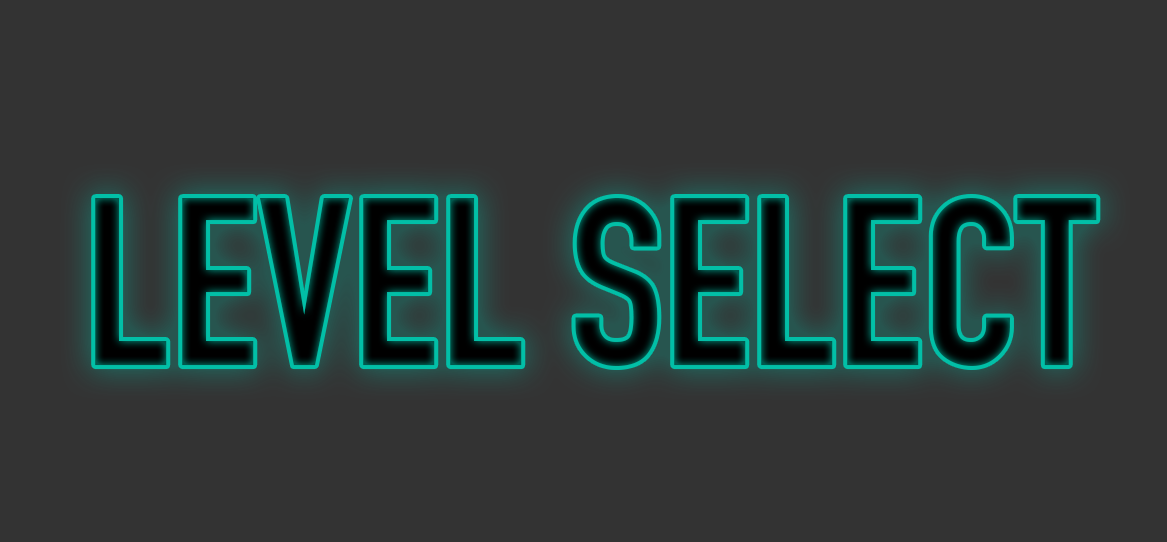
<style>
.page{position:relative;width:1167px;height:542px;background:#333333}
.page>*{position:absolute;margin:0}
.t1{font:233.7px "DINEngschrift"}
</style>
<div class="page">
<p class="t1" style="left:95px;top:198px;width:1002px;height:168px">LEVEL SELECT</p>
</div>
